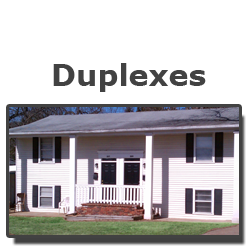
<style>
.page{position:relative;width:250px;height:250px;background:#ffffff}
.page>*{position:absolute;margin:0}
.t1{font:30px "Verdana-Bold";color:#4c4c4c}
</style>
<div class="page">
<p class="t1" style="left:53px;top:63px;width:153px;height:29px">Duplexes</p>
</div>
